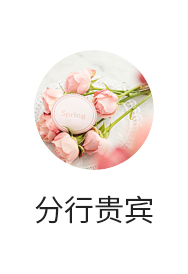
<style>
.page{position:relative;width:188px;height:274px;background:#ffffff}
.page>*{position:absolute;margin:0}
.t1{font:30px "SourceHanSansCN-Normal";color:#222222}
</style>
<div class="page">
<p class="t1" style="left:35px;top:195px;width:118px;height:29px">分行贵宾</p>
</div>
